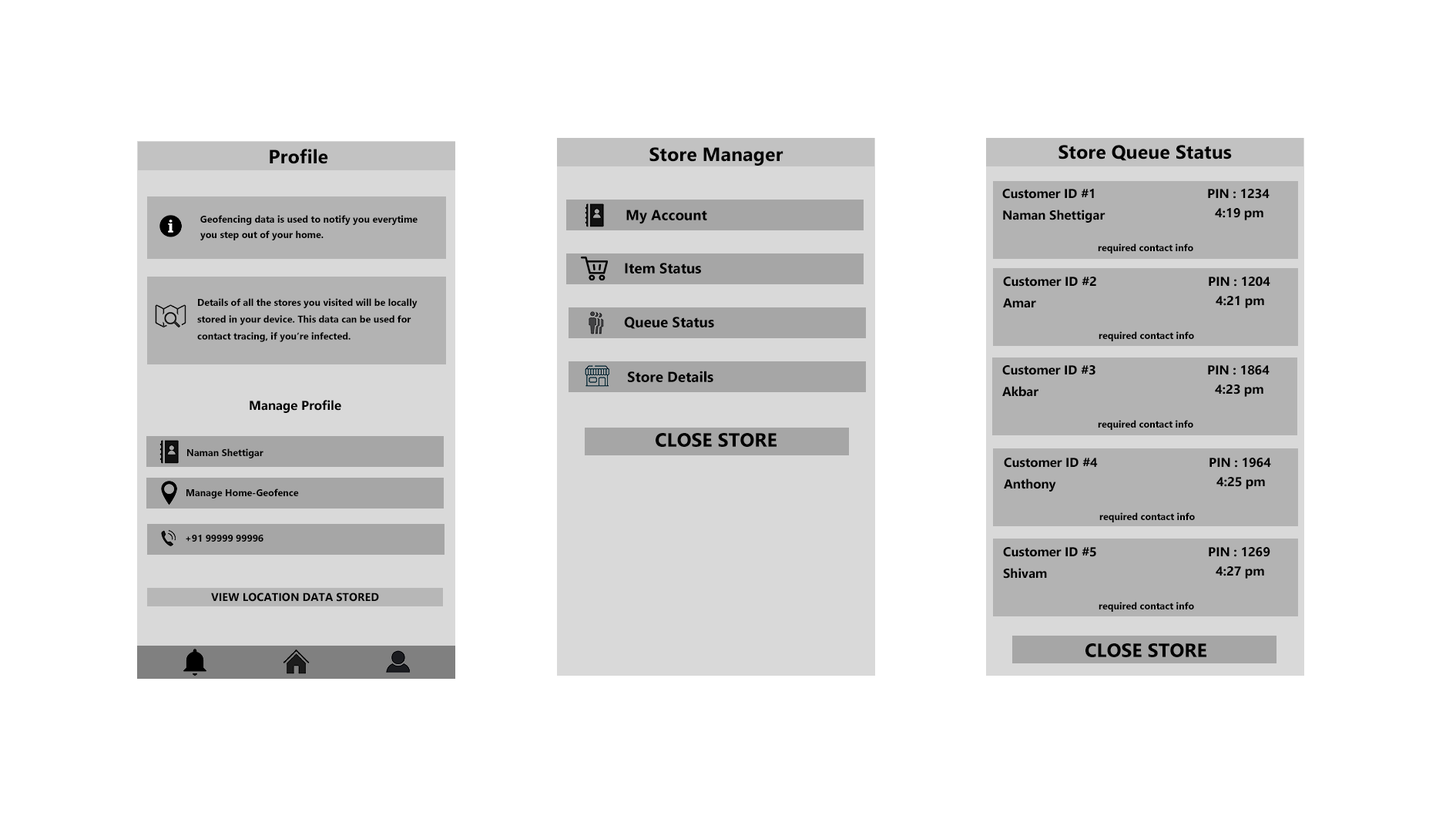
<style>
.page{position:relative;width:1456px;height:819px;background:#ffffff}
.page>*{position:absolute;margin:0}
.t1{font:19.3px "SegoeUI-Bold";color:#000000}
.t2{font:12.8px "SegoeUI-Bold";color:#000000}
.t3{font:14.4px "SegoeUI-Bold";color:#000000}
.t4{font:9.6px "SegoeUI-Bold";color:#000000}
.t5{font:11.2px "SegoeUI-Bold";color:#000000}
</style>
<div class="page">
<p class="t1" style="left:270px;top:149px;width:58px;height:15px">Profile</p>
<p class="t1" style="left:649px;top:147px;width:135px;height:19px">Store Manager</p>
<p class="t1" style="left:1059px;top:145px;width:173px;height:16px">Store Queue Status</p>
<p class="t2" style="left:1002px;top:189px;width:92px;height:10px">Customer ID #1</p>
<p class="t2" style="left:1208px;top:189px;width:62px;height:10px">PIN : 1234</p>
<p class="t3" style="left:626px;top:210px;width:81px;height:14px">My Account</p>
<p class="t2" style="left:1003px;top:210px;width:103px;height:13px">Naman Shettigar</p>
<p class="t2" style="left:1215px;top:208px;width:48px;height:12px">4:19 pm</p>
<p class="t4" style="left:200px;top:215px;width:218px;height:10px">Geofencing data is used to notify you everytime</p>
<p class="t4" style="left:200px;top:230px;width:124px;height:10px">you step out of your home.</p>
<p class="t4" style="left:1098px;top:243px;width:95px;height:10px">required contact info</p>
<p class="t3" style="left:625px;top:263px;width:76px;height:10px">Item Status</p>
<p class="t2" style="left:1003px;top:277px;width:93px;height:10px">Customer ID #2</p>
<p class="t2" style="left:1209px;top:277px;width:61px;height:10px">PIN : 1204</p>
<p class="t4" style="left:197px;top:298px;width:221px;height:44px;text-align:justify">Details of all the stores you visited will be locally <br>stored in your device. This data can be used for <br>contact tracing, if you’re infected.</p>
<p class="t2" style="left:1003px;top:298px;width:33px;height:10px">Amar</p>
<p class="t2" style="left:1216px;top:296px;width:48px;height:12px">4:21 pm</p>
<p class="t3" style="left:624px;top:317px;width:90px;height:12px">Queue Status</p>
<p class="t4" style="left:1099px;top:331px;width:95px;height:10px">required contact info</p>
<p class="t2" style="left:1002px;top:365px;width:94px;height:10px">Customer ID #3</p>
<p class="t2" style="left:1208px;top:365px;width:62px;height:10px">PIN : 1864</p>
<p class="t3" style="left:628px;top:371px;width:85px;height:11px">Store Details</p>
<p class="t2" style="left:1002px;top:386px;width:37px;height:11px">Akbar</p>
<p class="t2" style="left:1215px;top:384px;width:48px;height:13px">4:23 pm</p>
<p class="t2" style="left:250px;top:400px;width:91px;height:13px">Manage Profile</p>
<p class="t4" style="left:1098px;top:420px;width:95px;height:10px">required contact info</p>
<p class="t1" style="left:656px;top:433px;width:121px;height:14px">CLOSE STORE</p>
<p class="t4" style="left:187px;top:448px;width:76px;height:10px">Naman Shettigar</p>
<p class="t2" style="left:1004px;top:458px;width:94px;height:10px">Customer ID #4</p>
<p class="t2" style="left:1210px;top:458px;width:61px;height:10px">PIN : 1964</p>
<p class="t2" style="left:1004px;top:478px;width:52px;height:14px">Anthony</p>
<p class="t2" style="left:1216px;top:477px;width:49px;height:12px">4:25 pm</p>
<p class="t4" style="left:186px;top:488px;width:113px;height:10px">Manage Home-Geofence</p>
<p class="t4" style="left:1099px;top:512px;width:96px;height:10px">required contact info</p>
<p class="t4" style="left:186px;top:535px;width:77px;height:7px">+91 99999 99996</p>
<p class="t2" style="left:1003px;top:547px;width:93px;height:10px">Customer ID #5</p>
<p class="t2" style="left:1209px;top:547px;width:61px;height:10px">PIN : 1269</p>
<p class="t2" style="left:1003px;top:568px;width:44px;height:11px">Shivam</p>
<p class="t2" style="left:1216px;top:566px;width:48px;height:13px">4:27 pm</p>
<p class="t5" style="left:211px;top:592px;width:168px;height:10px">VIEW LOCATION DATA STORED</p>
<p class="t4" style="left:1099px;top:602px;width:95px;height:10px">required contact info</p>
<p class="t1" style="left:1086px;top:643px;width:120px;height:14px">CLOSE STORE</p>
</div>
